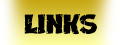
<style>
.page{position:relative;width:120px;height:45px}
.page>*{position:absolute;margin:0}
.t1{font:27.1px "Turtles";color:#000000}
</style>
<div class="page">
<p class="t1" style="left:24px;top:14px;width:73px;height:21px">LINKS</p>
</div>
